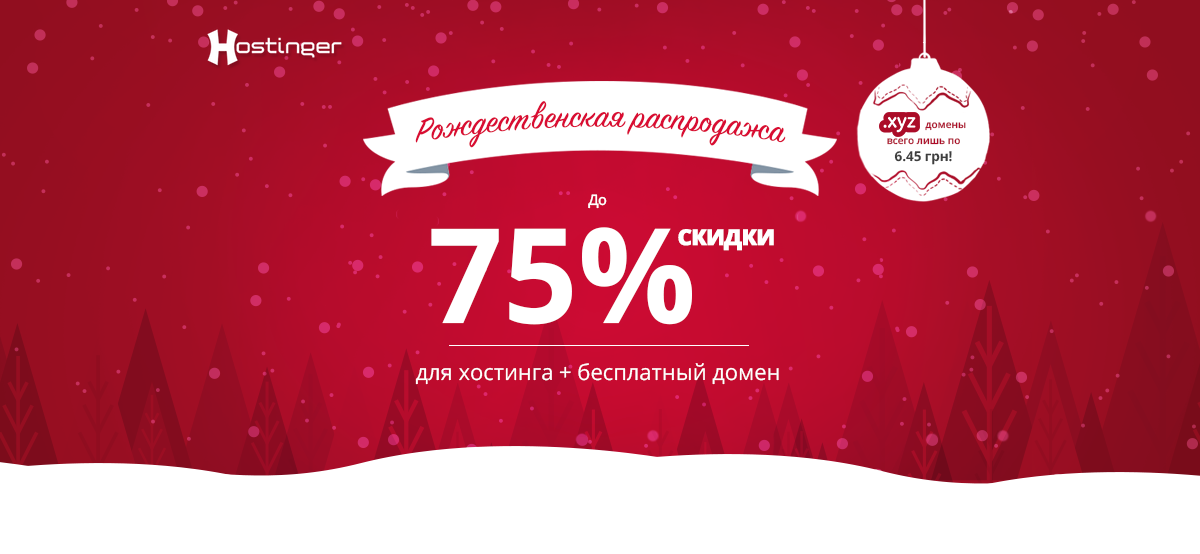
<style>
.page{position:relative;width:1200px;height:554px;background:#ffffff}
.page>*{position:absolute;margin:0}
.t1{font:36px "SignPainter-HouseScript";color:#d90c33}
.t2{font:10.1px/16.8px "OpenSans-Semibold";color:#ad0c29}
.t3{font:10.1px/13.4px "OpenSans-Semibold";color:#ad0c29}
.t4{font:13.5px/16.8px "OpenSans-Bold";color:#3e3e3e}
.t5{font:13.5px/13.4px "OpenSans-Bold";color:#3e3e3e}
.t6{font:14.7px "OpenSans-Semibold";letter-spacing:-0.05em;color:#ffffff}
.t7{font:132.1px "OpenSans-Bold";color:#ffffff;text-transform:uppercase}
.t8{font:22px "OpenSans-Extrabold";letter-spacing:-0.05em;color:#ffffff;text-transform:uppercase;font-weight:bold}
.t9{font:22px "OpenSans";color:#ffffff}
</style>
<div class="page">
<p class="t1" style="left:415px;top:101px;width:371px;height:47px">Рождественская распродажа</p>
<p class="t2" style="left:887px;top:122px;width:79px;height:43px;text-align:center"><span class="t3">                 домены<br></span>всего лишь по<br><span class="t4">6.45 </span><span class="t5">грн</span><span class="t4">!</span></p>
<p class="t6" style="left:588px;top:194px;width:19px;height:15px">До</p>
<p class="t7" style="left:431px;top:227px;width:261px;height:98px">75%</p>
<p class="t8" style="left:678px;top:229px;width:96px;height:22px">СКИДКИ</p>
<p class="t9" style="left:415px;top:363px;width:364px;height:22px">для хостинга + бесплатный домен</p>
</div>
